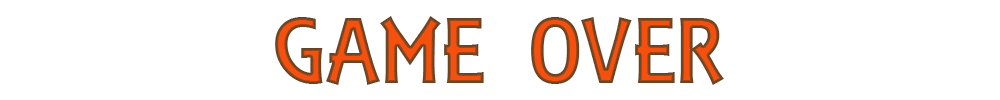
<style>
.page{position:relative;width:1000px;height:100px;background:#ffffff}
.page>*{position:absolute;margin:0}
.t1{font:100px "ARESSENCE"}
</style>
<div class="page">
<p class="t1" style="left:275px;top:16px;width:449px;height:69px">GAME OVER</p>
</div>
